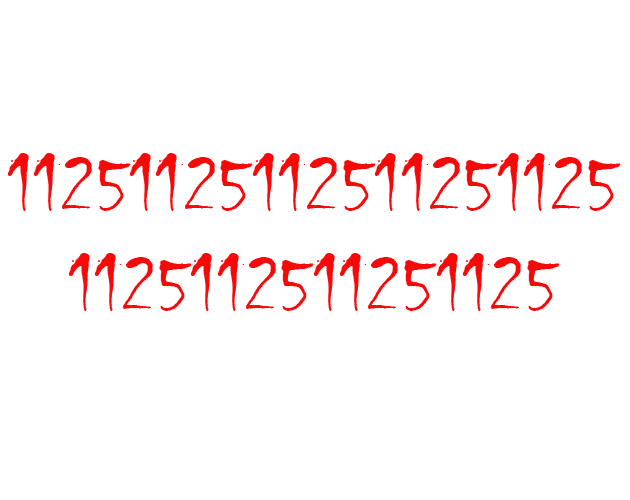
<style>
.page{position:relative;width:630px;height:500px;background:#ffffff}
.page>*{position:absolute;margin:0}
.t1{font:83.3px "Chiller-Regular";color:#f80909}
</style>
<div class="page">
<p class="t1" style="left:7px;top:153px;width:615px;height:158px;text-align:center">112511251125112511251125112511251125</p>
</div>
